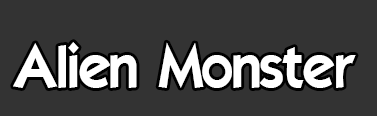
<style>
.page{position:relative;width:377px;height:116px;background:#333333}
.page>*{position:absolute;margin:0}
.t1{font:58.3px "ELEGANCE";color:#ffffff}
</style>
<div class="page">
<p class="t1" style="left:13px;top:42px;width:343px;height:46px">Alien Monster</p>
</div>
